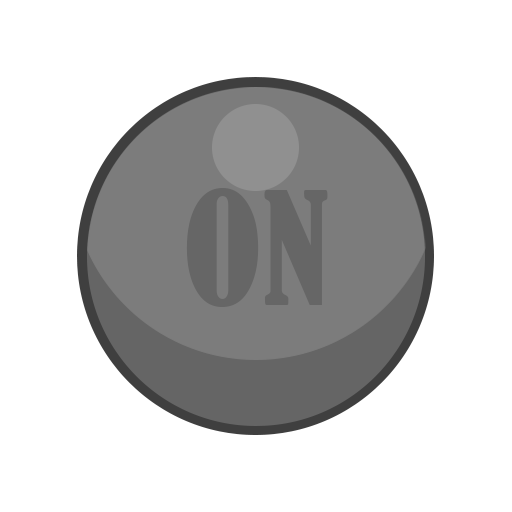
<style>
.page{position:relative;width:512px;height:512px;background:#ffffff}
.page>*{position:absolute;margin:0}
.t1{font:145.8px "BernardMT-Condensed";color:#666666}
</style>
<div class="page">
<p class="t1" style="left:186px;top:188px;width:142px;height:119px">ON</p>
</div>
